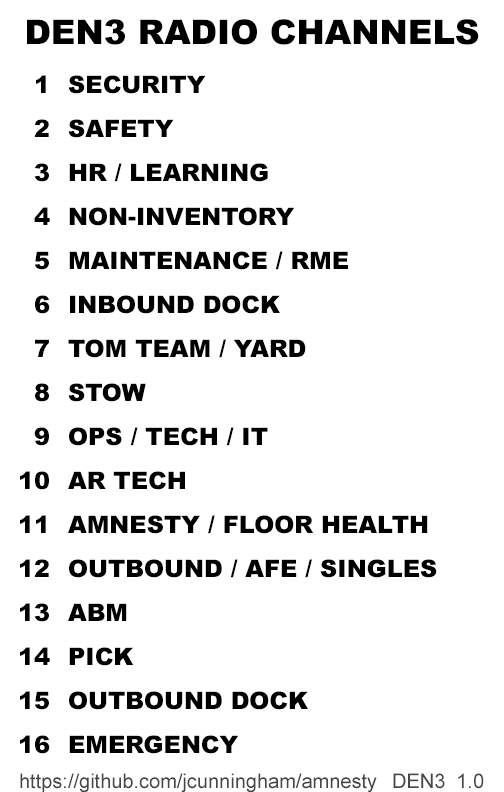
<style>
.page{position:relative;width:504px;height:792px;background:#ffffff}
.page>*{position:absolute;margin:0}
.t1{font:34px "Arial-Black";color:#000000}
.t2{font:24px/44px "Arial-Black";color:#000000}
.t3{font:20px "ArialMT";color:#474747}
</style>
<div class="page">
<p class="t1" style="left:27px;top:19px;width:452px;height:26px">DEN3 RADIO CHANNELS</p>
<p class="t2" style="left:20px;top:75px;width:30px;height:679px;text-align:right">1<br>2<br>3<br>4<br>5<br>6<br>7<br>8<br>9<br>10<br>11<br>12<br>13<br>14<br>15<br>16</p>
<p class="t2" style="left:68px;top:75px;width:369px;height:679px">SECURITY<br>SAFETY<br>HR / LEARNING<br>NON-INVENTORY<br>MAINTENANCE / RME<br>INBOUND DOCK<br>TOM TEAM / YARD<br>STOW<br>OPS / TECH / IT<br>AR TECH<br>AMNESTY / FLOOR HEALTH<br>OUTBOUND / AFE / SINGLES<br>ABM<br>PICK<br>OUTBOUND DOCK<br>EMERGENCY</p>
<p class="t3" style="left:20px;top:773px;width:357px;height:20px">https://github.com/jcunningham/amnesty</p>
<p class="t3" style="left:393px;top:773px;width:52px;height:16px">DEN3</p>
<p class="t3" style="left:458px;top:773px;width:26px;height:16px">1.0</p>
</div>
